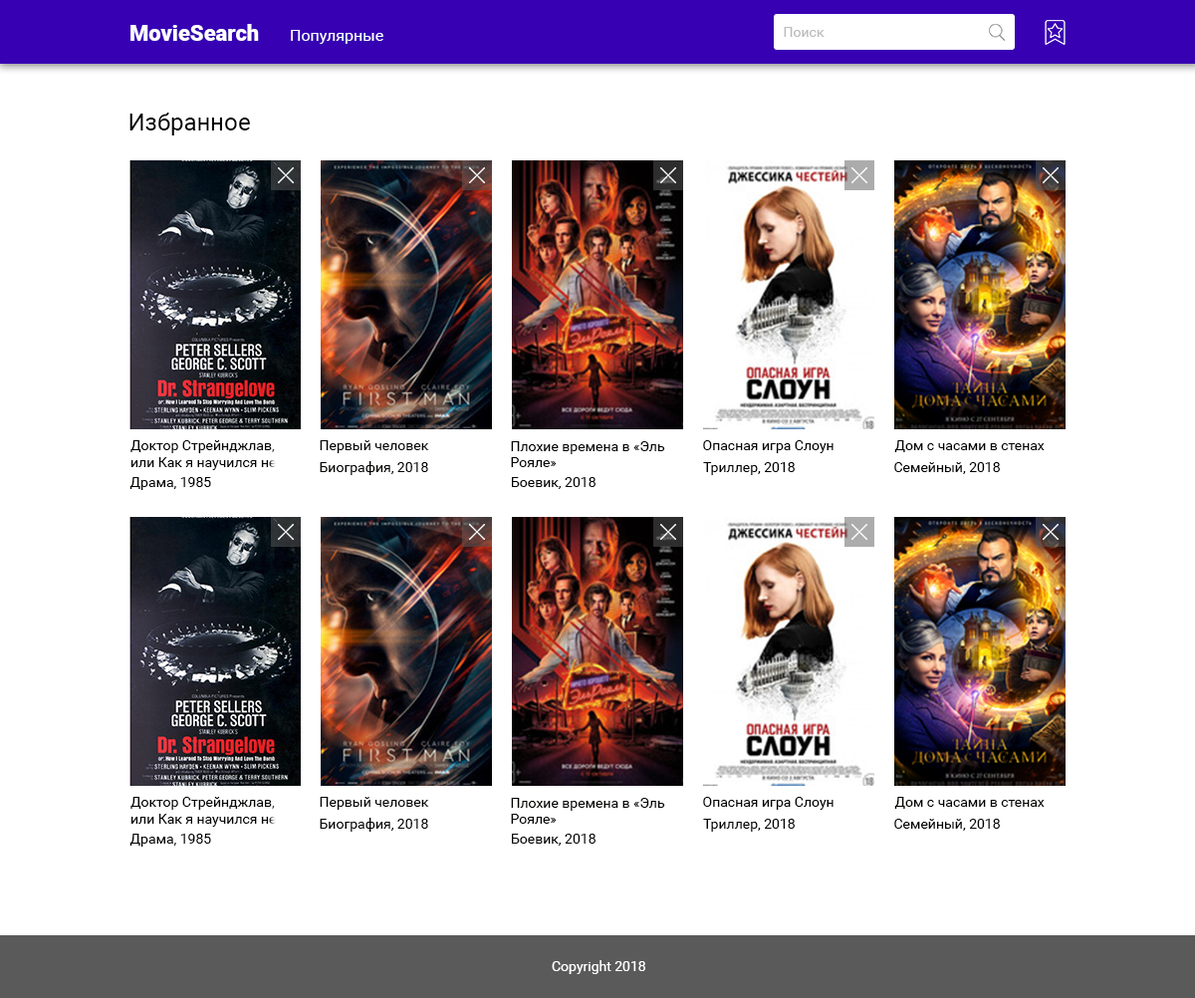
<style>
.page{position:relative;width:1195px;height:998px;background:#ffffff}
.page>*{position:absolute;margin:0}
.t1{font:21.9px "Roboto-Black";color:#ffffff}
.t2{font:15.9px "Roboto-Regular";color:#ffffff}
.t3{font:13.9px "Roboto-Regular";color:#bbbbbb}
.t4{font:23.9px "Roboto-Regular";color:#020301}
.t5{font:13.9px "Roboto-Regular";color:#020301}
.t6{font:13.9px "Roboto-Regular";color:#ffffff}
</style>
<div class="page">
<p class="t1" style="left:130px;top:24px;width:129px;height:17px">MovieSearch</p>
<p class="t2" style="left:291px;top:30px;width:92px;height:14px">Популярные</p>
<p class="t3" style="left:784px;top:27px;width:41px;height:10px">Поиск</p>
<p class="t4" style="left:129px;top:113px;width:121px;height:22px">Избранное</p>
<p class="t5" style="left:130px;top:440px;width:146px;height:30px">Доктор Стрейнджлав, <br>или Как я научился не</p>
<p class="t5" style="left:320px;top:440px;width:109px;height:13px">Первый человек</p>
<p class="t5" style="left:511px;top:441px;width:154px;height:26px">Плохие времена в «Эль <br>Рояле»</p>
<p class="t5" style="left:703px;top:440px;width:131px;height:13px">Опасная игра Слоун</p>
<p class="t5" style="left:894px;top:440px;width:151px;height:12px">Дом с часами в стенах</p>
<p class="t5" style="left:320px;top:461px;width:108px;height:14px">Биография, 2018</p>
<p class="t5" style="left:703px;top:462px;width:92px;height:13px">Триллер, 2018</p>
<p class="t5" style="left:894px;top:462px;width:106px;height:12px">Семейный, 2018</p>
<p class="t5" style="left:129px;top:477px;width:82px;height:13px">Драма, 1985</p>
<p class="t5" style="left:512px;top:477px;width:84px;height:12px">Боевик, 2018</p>
<p class="t5" style="left:130px;top:797px;width:146px;height:30px">Доктор Стрейнджлав, <br>или Как я научился не</p>
<p class="t5" style="left:320px;top:797px;width:109px;height:13px">Первый человек</p>
<p class="t5" style="left:511px;top:798px;width:154px;height:26px">Плохие времена в «Эль <br>Рояле»</p>
<p class="t5" style="left:703px;top:797px;width:131px;height:13px">Опасная игра Слоун</p>
<p class="t5" style="left:894px;top:797px;width:151px;height:12px">Дом с часами в стенах</p>
<p class="t5" style="left:320px;top:818px;width:108px;height:14px">Биография, 2018</p>
<p class="t5" style="left:703px;top:819px;width:92px;height:13px">Триллер, 2018</p>
<p class="t5" style="left:894px;top:819px;width:106px;height:12px">Семейный, 2018</p>
<p class="t5" style="left:129px;top:834px;width:82px;height:12px">Драма, 1985</p>
<p class="t5" style="left:512px;top:834px;width:84px;height:11px">Боевик, 2018</p>
<p class="t6" style="left:552px;top:960px;width:93px;height:14px">Copyright 2018</p>
</div>
